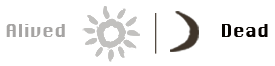
<style>
.page{position:relative;width:275px;height:66px;background:#ffffff}
.page>*{position:absolute;margin:0}
.t1{font:17.4px "Krungthep";letter-spacing:0.01em;color:#a6a4a3;scale:1.03 1}
.t2{font:17.4px "Krungthep";letter-spacing:0.01em;color:#080401;scale:1.03 1}
</style>
<div class="page">
<p class="t1" style="left:6px;top:24px;width:59px;height:13px">Alived</p>
<p class="t1" style="left:6px;top:24px;width:59px;height:13px">Alived</p>
<p class="t2" style="left:222px;top:24px;width:46px;height:13px">Dead</p>
</div>
